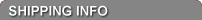
<style>
.page{position:relative;width:202px;height:20px;background:#858585}
.page>*{position:absolute;margin:0}
.t1{font:13.3px "Arial-BoldMT";color:#ffffff}
</style>
<div class="page">
<p class="t1" style="left:9px;top:5px;width:99px;height:11px">SHIPPING INFO</p>
</div>
